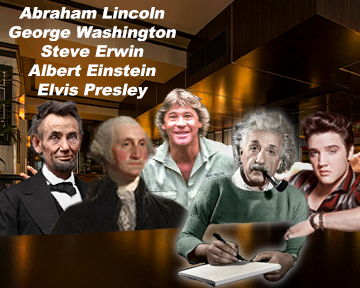
<style>
.page{position:relative;width:360px;height:288px}
.page>*{position:absolute;margin:0}
.t1{font:16px "Arial-Black";letter-spacing:-0.01em;color:#ffffff;font-style:italic}
</style>
<div class="page">
<p class="t1" style="left:9px;top:7px;width:167px;height:92px;text-align:center">Abraham Lincoln<br>George Washington<br>Steve Erwin<br>Albert Einstein<br>Elvis Presley</p>
</div>
